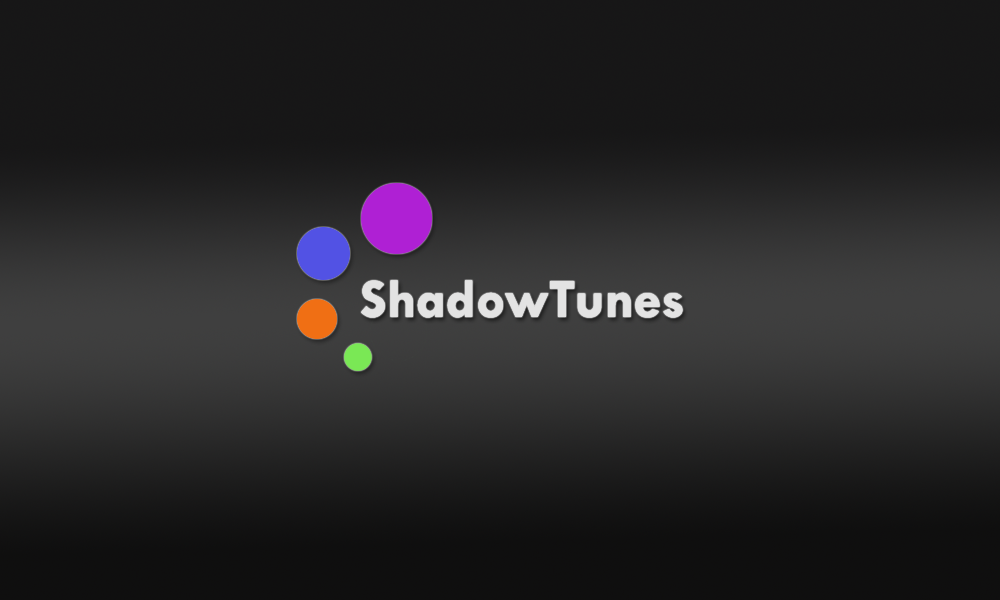
<style>
.page{position:relative;width:1000px;height:600px}
.page>*{position:absolute;margin:0}
.t1{font:56px "TwCenMT-Bold";color:#e3e3e3}
</style>
<div class="page">
<p class="t1" style="left:361px;top:280px;width:322px;height:38px">ShadowTunes</p>
</div>
